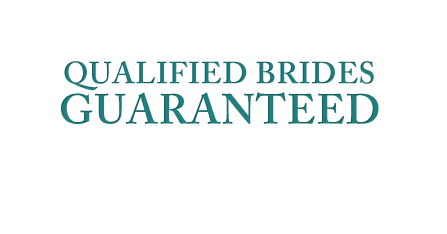
<style>
.page{position:relative;width:447px;height:234px;background:#ffffff}
.page>*{position:absolute;margin:0}
.t1{font:30.3px/28.7px "ACaslonPro-Semibold";letter-spacing:0.02em;color:#1f7e7e;text-transform:uppercase}
.t2{font:41.8px/40.3px "ACaslonPro-Semibold";letter-spacing:0.02em;color:#1f7e7e;text-transform:uppercase}
</style>
<div class="page">
<p class="t1" style="left:61px;top:60px;width:318px;height:64px;text-align:center">Qualified Brides <br><span class="t2">Guaranteed</span></p>
</div>
